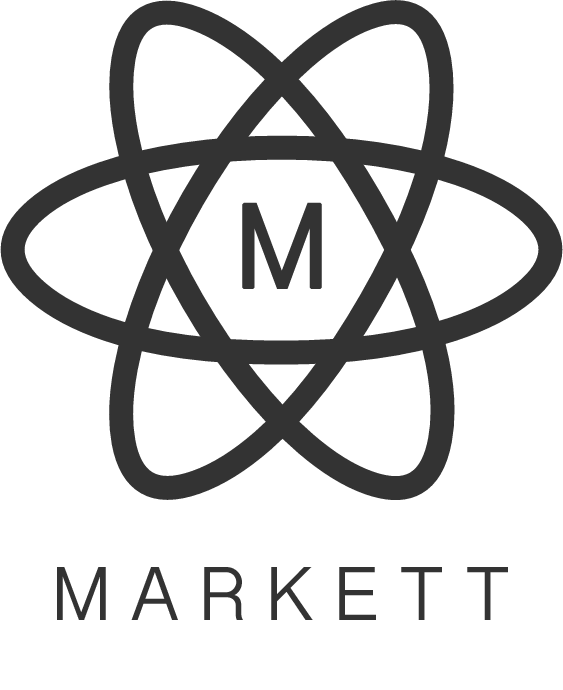
<style>
.page{position:relative;width:563px;height:690px;background:#ffffff}
.page>*{position:absolute;margin:0}
.t1{font:110px "SinhalaSangamMN-Bold";color:#333333;font-weight:bold}
.t2{font:70px "SinhalaSangamMN-Bold";letter-spacing:0.3em;color:#333333}
</style>
<div class="page">
<p class="t1" style="left:242px;top:202px;width:80px;height:87px">M</p>
<p class="t2" style="left:57px;top:567px;width:451px;height:53px">MARKETT</p>
</div>
